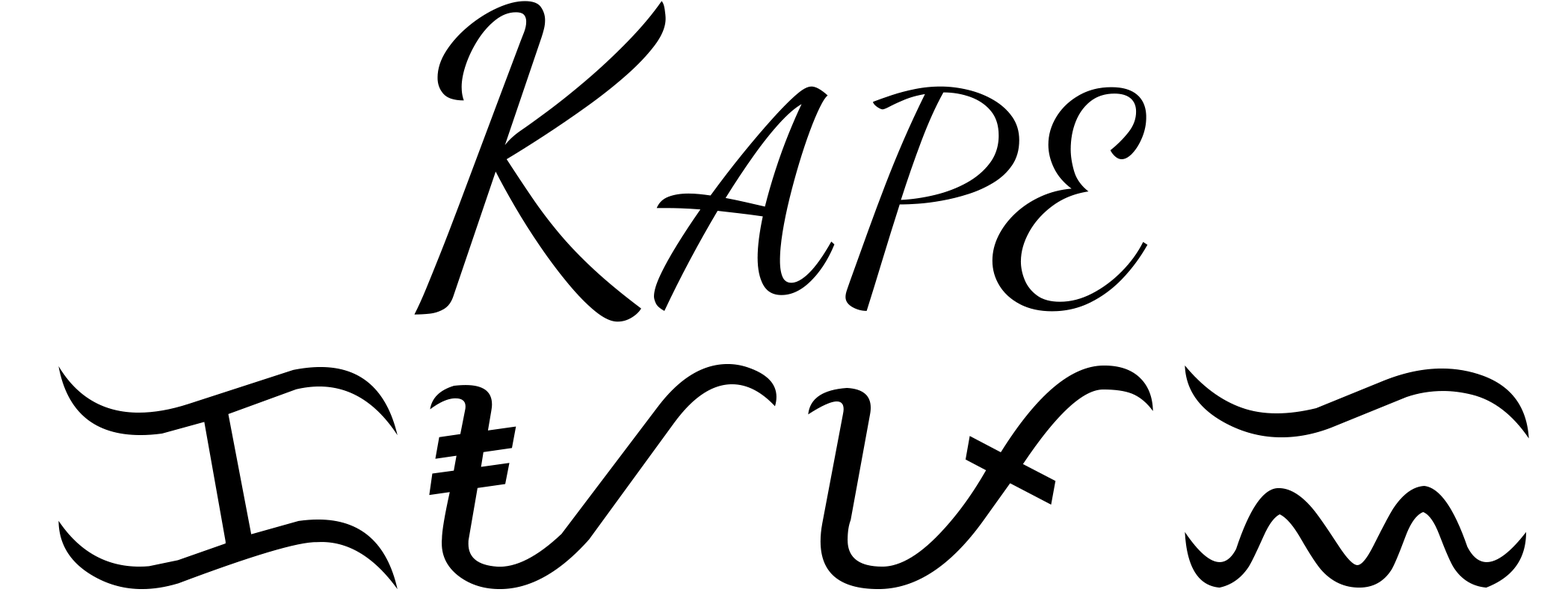
<style>
.page{position:relative;width:1568px;height:607px;background:#ffffff}
.page>*{position:absolute;margin:0}
.t1{font:397px "DancingScript-Regular";color:#000000;font-variant:small-caps;scale:1.1 1}
.t2{font:334.8px "TagalogStylized";color:#000000;font-variant:small-caps;scale:1.1 1}
</style>
<div class="page">
<p class="t1" style="left:414px;top:1px;width:734px;height:321px">Kape</p>
<p class="t2" style="left:58px;top:364px;width:1471px;height:225px">KAPE</p>
</div>
